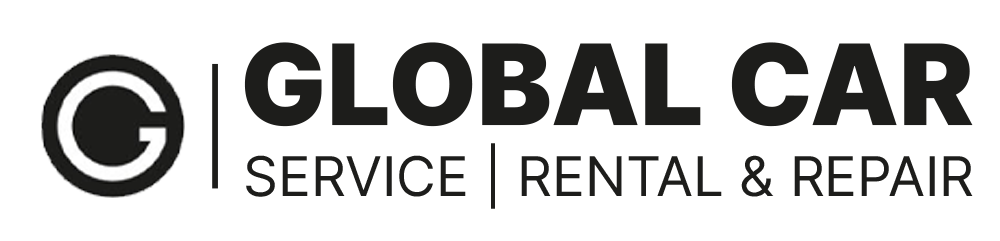
<style>
.page{position:relative;width:1000px;height:241px;background:#ffffff}
.page>*{position:absolute;margin:0}
.t1{font:112px "Inter-Black";color:#333333;text-transform:uppercase}
.t2{font:104.2px "Inter-Light";color:#1d1d1b;text-transform:uppercase}
.t3{font:54.6px "Inter-Regular";color:#333333;text-transform:uppercase}
</style>
<div class="page">
<p class="t1" style="left:244px;top:42px;width:729px;height:85px">GLOBAL CAR</p>
<p class="t2" style="left:212px;top:63px;width:6px;height:126px">|</p>
<p class="t3" style="left:246px;top:143px;width:727px;height:66px">SERVICE | Rental &amp; Repair</p>
</div>
